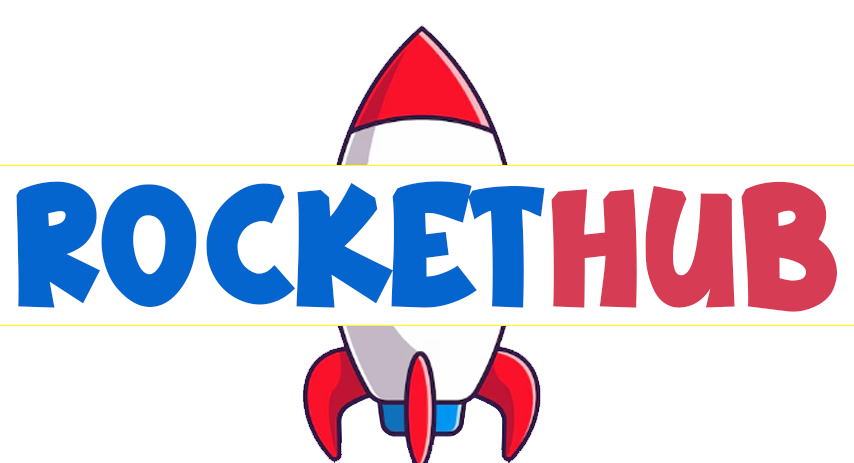
<style>
.page{position:relative;width:854px;height:463px;background:#ffffff}
.page>*{position:absolute;margin:0}
.t1{font:251.1px "PlayJackDemoRegular";color:#0565ce}
.t2{font:251.1px "PlayJackDemoRegular";color:#d63d55}
</style>
<div class="page">
<p class="t1" style="left:16px;top:181px;width:821px;height:131px">rocket<span class="t2">hub</span></p>
</div>
